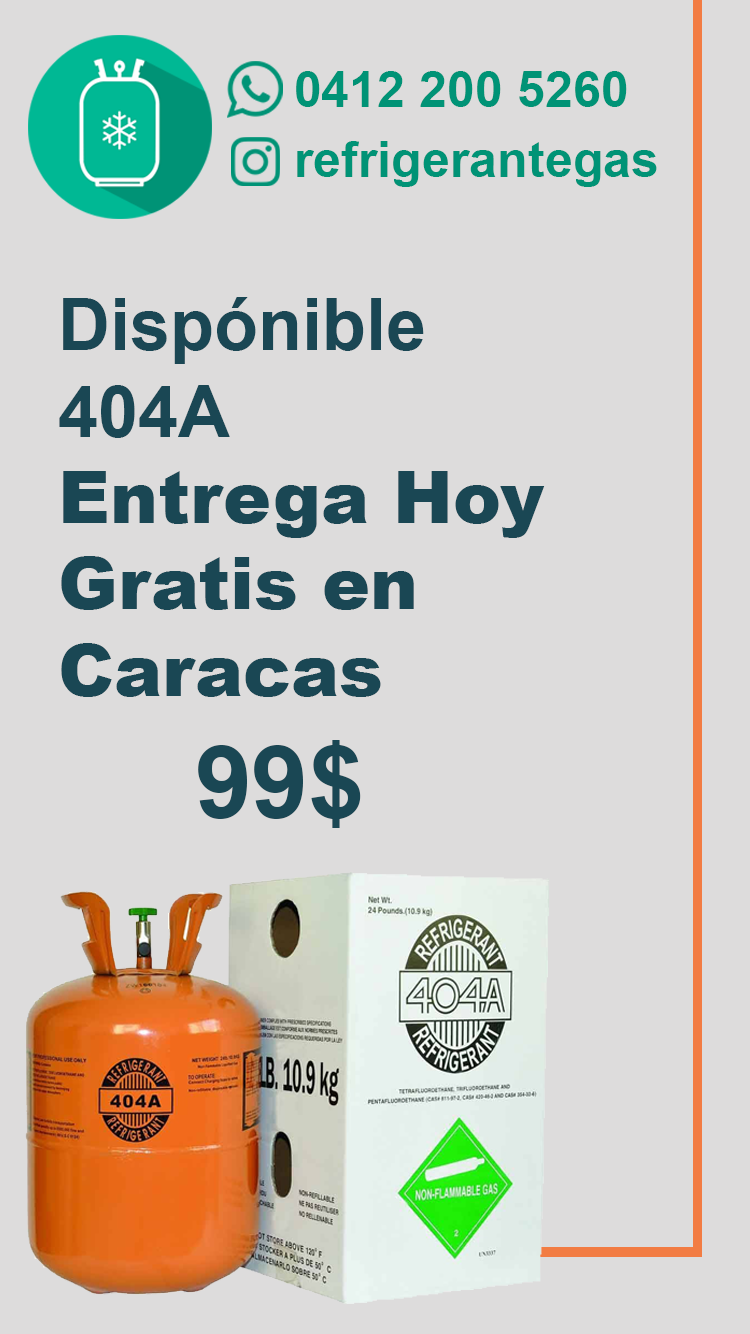
<style>
.page{position:relative;width:750px;height:1334px;background:#dddcdc}
.page>*{position:absolute;margin:0}
.t1{font:50.3px "Arial-BoldMT";color:#009376}
.t2{font:72px "Arial-Black";color:#1a4754}
.t3{font:72px "Arial-BoldMT";color:#1a4754}
.t4{font:102px "Arial-BoldMT";color:#1a4754}
</style>
<div class="page">
<p class="t1" style="left:296px;top:71px;width:331px;height:36px">0412 200 5260</p>
<p class="t1" style="left:297px;top:141px;width:360px;height:46px">refrigerantegas</p>
<p class="t2" style="left:59px;top:297px;width:486px;height:531px"><span class="t3">Dispónible<br>404A<br></span>Entrega Hoy<br>Gratis en Caracas<br>    <span class="t4">  99$</span></p>
</div>
